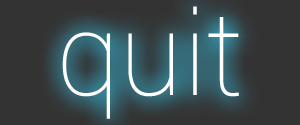
<style>
.page{position:relative;width:300px;height:125px;background:#333333}
.page>*{position:absolute;margin:0}
.t1{font:116px "Roboto-Thin";color:#ffffff}
</style>
<div class="page">
<p class="t1" style="left:62px;top:6px;width:177px;height:113px">quit</p>
</div>
